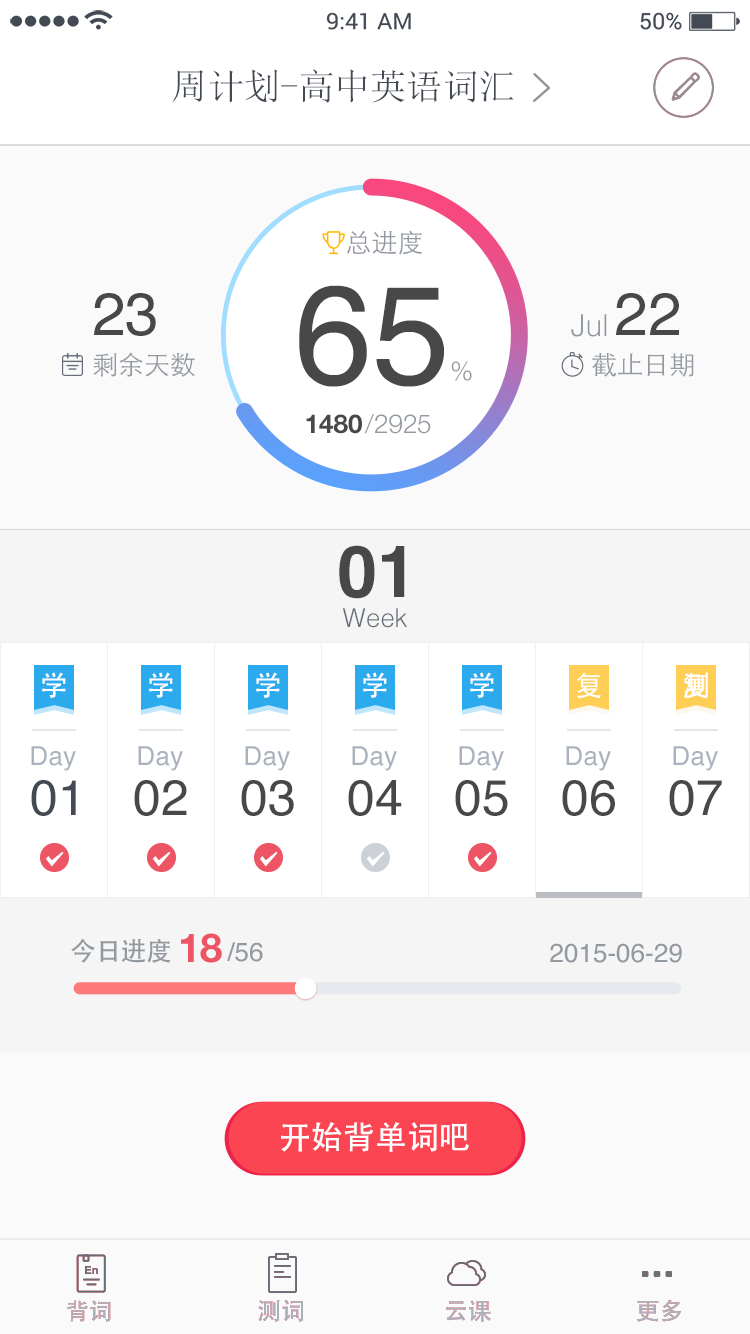
<style>
.page{position:relative;width:750px;height:1334px;background:#fafafa}
.page>*{position:absolute;margin:0}
.t1{font:36px "SimSun";color:#434a54}
.t2{font:26px "STHeitiSC-Light";color:#9399a0}
.t3{font:60px "Helvetica";color:#484848}
.t4{font:140px "Helvetica";color:#484848}
.t5{font:30.2px "Helvetica-Light";color:#9399a0}
.t6{font:26px "HelveticaNeue-Light";color:#9399a0}
.t7{font:26px "HelveticaNeue-Bold";color:#484848}
.t8{font:72px "Helvetica-Bold";color:#484848}
.t9{font:26px "Helvetica-Light";color:#656d78}
.t10{font:28px "STHeitiSC-Medium";color:#ffffff}
.t11{font:26px "Helvetica";color:#aab2bd}
.t12{font:50px "Helvetica";color:#434a54}
.t13{font:50px "Helvetica";color:#484848}
</style>
<div class="page">
<p class="t1" style="left:172px;top:69px;width:342px;height:34px">周计划-高中英语词汇</p>
<p class="t2" style="left:346px;top:230px;width:76px;height:25px">总进度</p>
<p class="t3" style="left:94px;top:293px;width:62px;height:43px">23</p>
<p class="t4" style="left:299px;top:285px;width:145px;height:102px">65</p>
<p class="t3" style="left:616px;top:293px;width:63px;height:42px">22</p>
<p class="t5" style="left:571px;top:314px;width:36px;height:23px">Jul</p>
<p class="t2" style="left:93px;top:352px;width:102px;height:25px">剩余天数</p>
<p class="t2" style="left:592px;top:353px;width:102px;height:24px">截止日期</p>
<p class="t6" style="left:451px;top:361px;width:21px;height:20px">%</p>
<p class="t7" style="left:306px;top:414px;width:56px;height:20px">1480</p>
<p class="t6" style="left:364px;top:414px;width:67px;height:20px">/2925</p>
<p class="t8" style="left:339px;top:545px;width:66px;height:54px">01</p>
<p class="t9" style="left:342px;top:608px;width:65px;height:20px">Week</p>
<p class="t10" style="left:42px;top:672px;width:24px;height:26px">学</p>
<p class="t10" style="left:149px;top:672px;width:24px;height:26px">学</p>
<p class="t10" style="left:256px;top:672px;width:24px;height:26px">学</p>
<p class="t10" style="left:363px;top:672px;width:24px;height:26px">学</p>
<p class="t10" style="left:470px;top:672px;width:24px;height:26px">学</p>
<p class="t10" style="left:576px;top:672px;width:25px;height:26px">复</p>
<p class="t10" style="left:683px;top:672px;width:26px;height:26px">测</p>
<p class="t11" style="left:31px;top:746px;width:45px;height:25px">Day</p>
<p class="t11" style="left:138px;top:746px;width:45px;height:25px">Day</p>
<p class="t11" style="left:245px;top:746px;width:45px;height:25px">Day</p>
<p class="t11" style="left:352px;top:746px;width:45px;height:25px">Day</p>
<p class="t11" style="left:459px;top:746px;width:45px;height:25px">Day</p>
<p class="t11" style="left:566px;top:746px;width:45px;height:25px">Day</p>
<p class="t11" style="left:673px;top:746px;width:45px;height:25px">Day</p>
<p class="t12" style="left:31px;top:780px;width:45px;height:36px">01</p>
<p class="t13" style="left:134px;top:780px;width:53px;height:36px">02</p>
<p class="t13" style="left:241px;top:780px;width:53px;height:36px">03</p>
<p class="t13" style="left:348px;top:780px;width:54px;height:36px">04</p>
<p class="t13" style="left:455px;top:780px;width:53px;height:36px">05</p>
<p class="t13" style="left:562px;top:780px;width:53px;height:36px">06</p>
<p class="t13" style="left:669px;top:780px;width:53px;height:36px">07</p>
</div>
